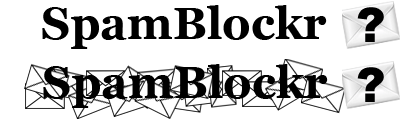
<style>
.page{position:relative;width:400px;height:120px;background:#ffffff}
.page>*{position:absolute;margin:0}
.t1{font:45px "Georgia-Bold";color:#000000}
</style>
<div class="page">
<p class="t1" style="left:42px;top:5px;width:285px;height:44px">SpamBlockr</p>
<p class="t1" style="left:43px;top:64px;width:285px;height:44px">SpamBlockr</p>
</div>
